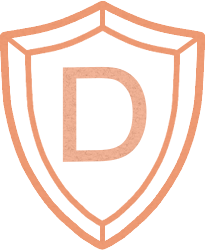
<style>
.page{position:relative;width:205px;height:250px;background:#ffffff}
.page>*{position:absolute;margin:0}
.t1{font:131.9px "ArialMT";color:#edaf92;scale:1.07 1}
</style>
<div class="page">
<p class="t1" style="left:62px;top:66px;width:85px;height:96px;rotate:-1deg">D</p>
</div>
